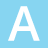
<style>
.page{position:relative;width:48px;height:48px;background:#87d5f1}
.page>*{position:absolute;margin:0}
.t1{font:48px "OpenSans-Semibold";color:#ffffff;text-transform:uppercase}
</style>
<div class="page">
<p class="t1" style="left:8px;top:6px;width:32px;height:35px">a</p>
</div>
